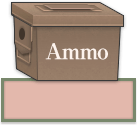
<style>
.page{position:relative;width:137px;height:125px;background:#e3b8ac}
.page>*{position:absolute;margin:0}
.t1{font:22px "RyuminPro-ExBold";letter-spacing:-0.08em;color:#fdf3ed}
</style>
<div class="page">
<p class="t1" style="left:45px;top:43px;width:63px;height:17px">Ammo</p>
</div>
